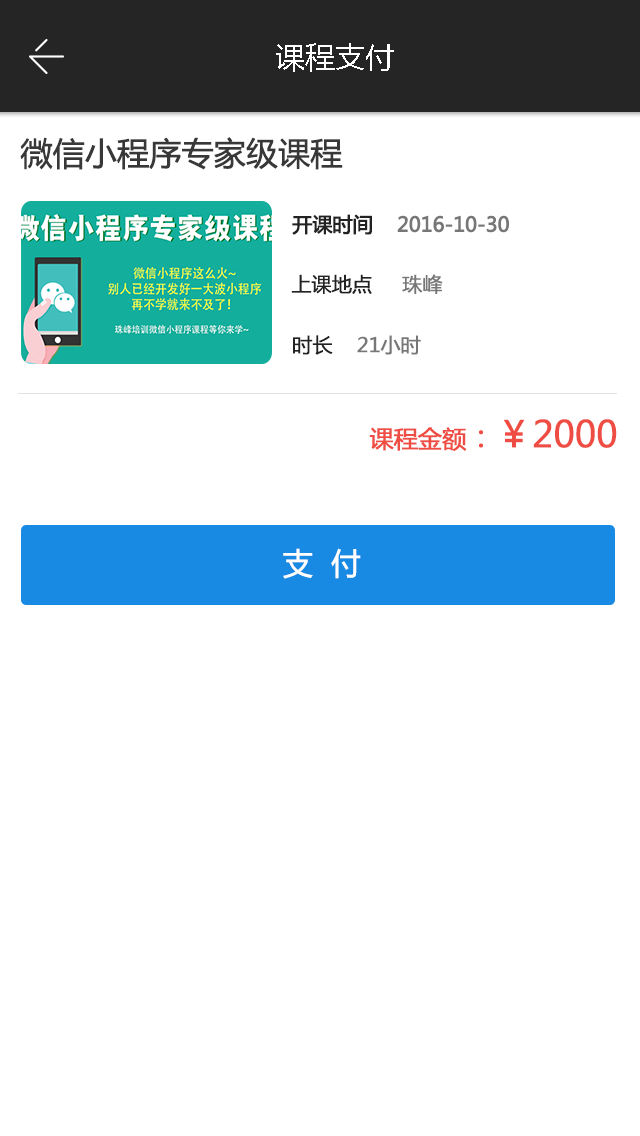
<style>
.page{position:relative;width:640px;height:1136px;background:#ffffff}
.page>*{position:absolute;margin:0}
.t1{font:30px "MicrosoftYaHei";color:#ffffff}
.t2{font:32px "MicrosoftYaHei";letter-spacing:-0.02em;color:#383838;font-weight:bold}
.t3{font:20px "MicrosoftYaHei";letter-spacing:-0.02em;color:#777777;font-weight:bold}
.t4{font:20px "MicrosoftYaHei";letter-spacing:-0.02em;color:#222222;font-weight:bold}
.t5{font:36px "MicrosoftYaHei";letter-spacing:-0.02em;color:#ef4d43;font-weight:bold}
.t6{font:24px "MicrosoftYaHei";letter-spacing:-0.02em;color:#ef4d43;font-weight:bold}
.t7{font:30px "MicrosoftYaHei";letter-spacing:-0.02em;color:#ef4d43;font-weight:bold}
.t8{font:30px "MicrosoftYaHei";letter-spacing:-0.02em;color:#ffffff;font-weight:bold}
</style>
<div class="page">
<p class="t1" style="left:276px;top:43px;width:118px;height:29px">课程支付</p>
<p class="t2" style="left:20px;top:137px;width:323px;height:33px">微信小程序专家级课程</p>
<p class="t3" style="left:292px;top:214px;width:217px;height:21px"><span class="t4">开课时间  </span>  2016-10-30</p>
<p class="t4" style="left:291px;top:274px;width:152px;height:20px"><span class="t3"><br> <br></span>上课地点 <span class="t3">    珠峰</span></p>
<p class="t3" style="left:293px;top:335px;width:128px;height:20px"><span class="t4">时长    </span>21小时</p>
<p class="t5" style="left:369px;top:419px;width:248px;height:32px"><span class="t6">课程金额</span><span class="t7">：</span>￥2000</p>
<p class="t8" style="left:283px;top:548px;width:78px;height:31px">支  付</p>
</div>
